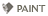
<style>
.page{position:relative;width:48px;height:16px;background:#ffffff}
.page>*{position:absolute;margin:0}
.t1{font:10px "AmiraParadiso";color:#6a685a}
</style>
<div class="page">
<p class="t1" style="left:17px;top:5px;width:29px;height:7px">PAINT</p>
</div>
